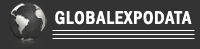
<style>
.page{position:relative;width:200px;height:49px;background:#333333}
.page>*{position:absolute;margin:0}
.t1{font:18.2px "FranklinGothic-MediumCond";letter-spacing:0.03em;color:#fefefe;font-weight:bold}
</style>
<div class="page">
<p class="t1" style="left:55px;top:11px;width:137px;height:14px">GLOBALEXPODATA</p>
</div>
